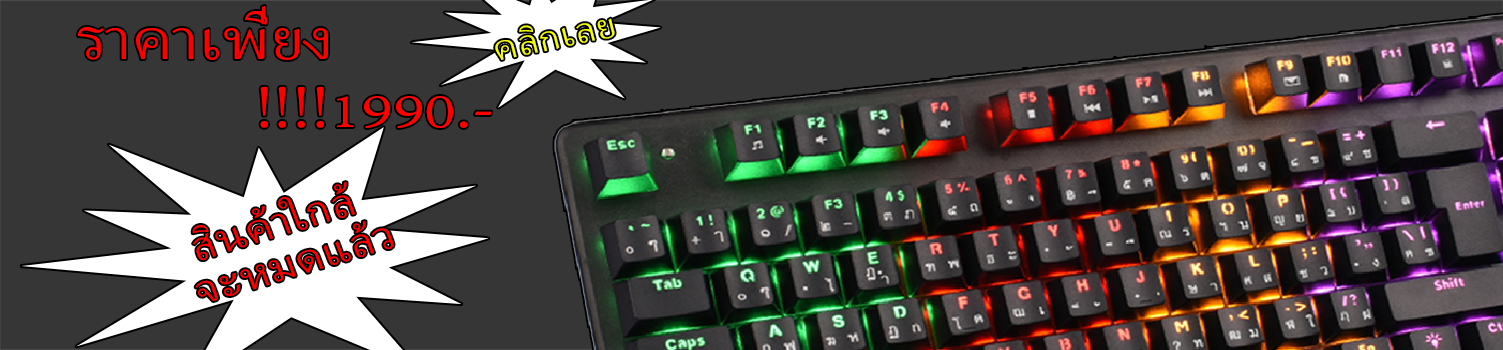
<style>
.page{position:relative;width:1503px;height:350px;background:#363636}
.page>*{position:absolute;margin:0}
.t1{font:73.5px "AdobeThai-Regular";color:#ff0000;scale:1.12 1}
.t2{font:45.1px "AdobeThai-Regular";color:#f6ff00;scale:1.11 1}
.t3{font:52.1px/42.9px "AdobeThai-Regular";color:#ff0000;scale:1.09 1}
</style>
<div class="page">
<p class="t1" style="left:77px;top:6px;width:251px;height:54px">ราคาเพี่ยง</p>
<p class="t2" style="left:495px;top:18px;width:120px;height:42px;rotate:-12deg">คลิกเลย</p>
<p class="t1" style="left:260px;top:86px;width:232px;height:42px">!!!!1990.-</p>
<p class="t3" style="left:192px;top:182px;width:202px;height:119px;rotate:-17deg">สินค้าใกล้<br>จะหมดแล้ว</p>
</div>
